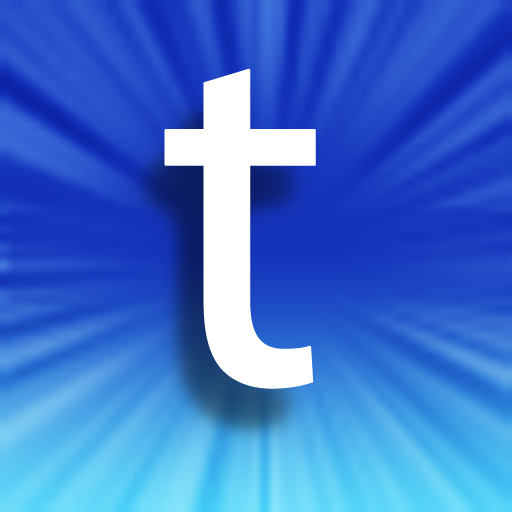
<style>
.page{position:relative;width:512px;height:512px}
.page>*{position:absolute;margin:0}
.t1{font:520.7px "MyriadPro-Regular";color:#ffffff;font-weight:bold}
</style>
<div class="page">
<p class="t1" style="left:164px;top:68px;width:152px;height:321px">t</p>
</div>
